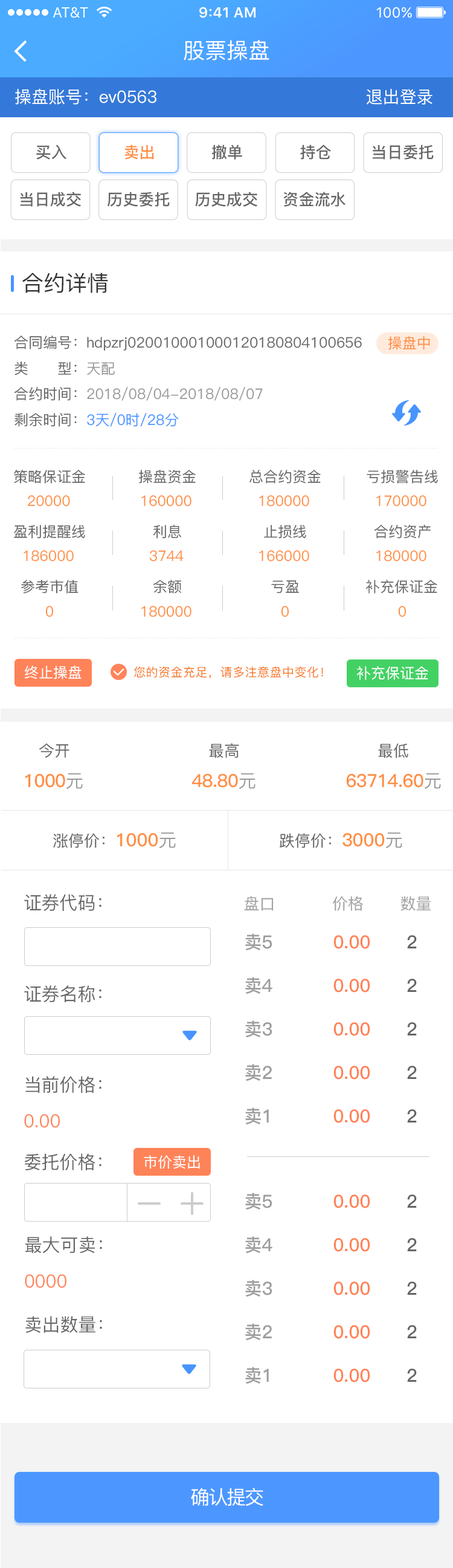
<style>
.page{position:relative;width:453px;height:1568px;background:#ffffff}
.page>*{position:absolute;margin:0}
.t1{font:21.8px "PingFang-SC-Medium";color:#ffffff}
.t2{font:16.9px "PingFang-SC-Medium";color:#ffffff}
.t3{font:15.7px "PingFang-SC-Bold";color:#666666}
.t4{font:15.7px "PingFang-SC-Bold";color:#ff8e42}
.t5{font:21.8px "PingFang-SC-Medium";color:#333333}
.t6{font:14.5px "PingFang-SC-Medium";color:#666666}
.t7{font:14.5px "PingFang-SC-Medium";color:#ff8e42}
.t8{font:14.5px "PingFang-SC-Medium";color:#999999}
.t9{font:14.5px "PingFang-SC-Medium";color:#4794ff}
.t10{font:14.5px "PingFang-SC-Medium";color:#ffffff}
.t11{font:12.1px "PingFang-SC-Medium";letter-spacing:0.025em;color:#f77116}
.t12{font:15.7px "PingFang-SC-Medium";color:#666666}
.t13{font:18.1px "PingFang-SC-Bold";letter-spacing:-0.02em;color:#ff8e42}
.t14{font:18.1px "PingFang-SC-Medium";letter-spacing:-0.02em;color:#999999}
.t15{font:18.1px "PingFang-SC-Bold";color:#ff8e42}
.t16{font:18.1px "PingFang-SC-Medium";color:#999999}
.t17{font:18.1px "PingFang-SC-Medium";color:#666666}
.t18{font:15.7px "PingFang-SC-Medium";color:#a2a2a2}
.t19{font:18.1px/43.5px "PingFang-SC-Bold";color:#ff8359}
.t20{font:18.1px/43.5px "PingFang-SC-Bold";color:#9d9d9d}
.t21{font:18.1px/43.5px "PingFang-SC-Bold";color:#666666}
.t22{font:18.1px/36.3px "PingFang-SC-Medium";color:#666666}
.t23{font:18.1px/54.4px "PingFang-SC-Medium";color:#666666}
.t24{font:18.1px/36.3px "PingFang-SC-Medium";color:#ff8359}
.t25{font:18.1px/41.1px "PingFang-SC-Medium";color:#666666}
.t26{font:18.1px/43.5px "PingFang-SC-Medium";color:#666666}
.t27{font:19.3px "PingFang-SC-Medium";letter-spacing:-0.06em;color:#ffffff}
</style>
<div class="page">
<p class="t1" style="left:184px;top:40px;width:86px;height:20px">股票操盘</p>
<p class="t2" style="left:15px;top:88px;width:418px;height:17px">操盘账号：ev0563                                     退出登录</p>
<p class="t3" style="left:36px;top:144px;width:30px;height:16px">买入</p>
<p class="t4" style="left:125px;top:144px;width:29px;height:16px">卖出</p>
<p class="t3" style="left:212px;top:144px;width:30px;height:16px">撤单</p>
<p class="t3" style="left:300px;top:144px;width:31px;height:16px">持仓</p>
<p class="t3" style="left:373px;top:144px;width:61px;height:16px">当日委托</p>
<p class="t3" style="left:20px;top:192px;width:61px;height:15px">当日成交</p>
<p class="t3" style="left:108px;top:192px;width:62px;height:15px">历史委托</p>
<p class="t3" style="left:195px;top:192px;width:63px;height:15px">历史成交</p>
<p class="t3" style="left:283px;top:192px;width:63px;height:15px">资金流水</p>
<p class="t5" style="left:22px;top:273px;width:86px;height:20px">合约详情</p>
<p class="t6" style="left:14px;top:335px;width:348px;height:16px">合同编号：hdpzrj020010001000120180804100656</p>
<p class="t7" style="left:388px;top:336px;width:42px;height:14px">操盘中</p>
<p class="t6" style="left:15px;top:361px;width:100px;height:14px">类      型：<span class="t8">天配</span></p>
<p class="t8" style="left:14px;top:387px;width:249px;height:14px"><span class="t6">合约时间：</span>2018/08/04-2018/08/07</p>
<p class="t9" style="left:15px;top:413px;width:164px;height:14px"><span class="t6">剩余时间：</span>3天/0时/28分</p>
<p class="t6" style="left:14px;top:470px;width:71px;height:14px">策略保证金</p>
<p class="t6" style="left:139px;top:470px;width:57px;height:14px">操盘资金</p>
<p class="t6" style="left:250px;top:470px;width:71px;height:14px">总合约资金</p>
<p class="t6" style="left:367px;top:470px;width:71px;height:14px">亏损警告线</p>
<p class="t7" style="left:28px;top:495px;width:42px;height:12px">20000</p>
<p class="t7" style="left:141px;top:495px;width:51px;height:12px">160000</p>
<p class="t7" style="left:259px;top:495px;width:50px;height:12px">180000</p>
<p class="t7" style="left:377px;top:495px;width:50px;height:12px">170000</p>
<p class="t6" style="left:14px;top:525px;width:71px;height:14px">盈利提醒线</p>
<p class="t6" style="left:154px;top:525px;width:27px;height:14px">利息</p>
<p class="t6" style="left:264px;top:525px;width:42px;height:14px">止损线</p>
<p class="t6" style="left:374px;top:525px;width:57px;height:14px">合约资产</p>
<p class="t7" style="left:24px;top:550px;width:50px;height:12px">186000</p>
<p class="t7" style="left:150px;top:550px;width:34px;height:12px">3744</p>
<p class="t7" style="left:259px;top:550px;width:50px;height:12px">166000</p>
<p class="t7" style="left:377px;top:550px;width:50px;height:12px">180000</p>
<p class="t6" style="left:21px;top:580px;width:58px;height:14px">参考市值</p>
<p class="t6" style="left:153px;top:580px;width:29px;height:14px">余额</p>
<p class="t6" style="left:271px;top:580px;width:28px;height:14px">亏盈</p>
<p class="t6" style="left:366px;top:580px;width:72px;height:14px">补充保证金</p>
<p class="t7" style="left:45px;top:606px;width:9px;height:11px">0</p>
<p class="t7" style="left:141px;top:606px;width:51px;height:11px">180000</p>
<p class="t7" style="left:281px;top:606px;width:9px;height:11px">0</p>
<p class="t7" style="left:398px;top:606px;width:9px;height:11px">0</p>
<p class="t10" style="left:25px;top:666px;width:57px;height:13px">终止操盘</p>
<p class="t11" style="left:134px;top:666px;width:189px;height:13px">您的资金充足，请多注意盘中变化！</p>
<p class="t10" style="left:357px;top:666px;width:72px;height:14px">补充保证金</p>
<p class="t12" style="left:39px;top:744px;width:31px;height:14px">今开</p>
<p class="t12" style="left:209px;top:743px;width:30px;height:15px">最高</p>
<p class="t12" style="left:378px;top:743px;width:31px;height:15px">最低</p>
<p class="t13" style="left:25px;top:773px;width:58px;height:16px">1000<span class="t14">元</span></p>
<p class="t13" style="left:192px;top:773px;width:64px;height:16px">48.80<span class="t14">元</span></p>
<p class="t13" style="left:346px;top:773px;width:95px;height:16px">63714.60<span class="t14">元</span></p>
<p class="t12" style="left:53px;top:832px;width:123px;height:16px">涨停价：<span class="t15">1000</span><span class="t16">元</span></p>
<p class="t12" style="left:280px;top:832px;width:123px;height:16px">跌停价：<span class="t15">3000</span><span class="t16">元</span></p>
<p class="t17" style="left:24px;top:894px;width:78px;height:17px">证券代码：</p>
<p class="t18" style="left:244px;top:896px;width:188px;height:15px">盘口           价格       数量</p>
<p class="t19" style="left:245px;top:933px;width:172px;height:192px"><span class="t20">卖5          </span>0.00<span class="t21">      2<br></span><span class="t20">卖4          </span>0.00<span class="t21">      2<br></span><span class="t20">卖3          </span>0.00<span class="t21">      2<br></span><span class="t20">卖2          </span>0.00<span class="t21">      2<br></span><span class="t20">卖1          </span>0.00<span class="t21">      2</span></p>
<p class="t22" style="left:24px;top:985px;width:78px;height:185px">证券名称：<br><br><span class="t23">当前价格：<br></span><span class="t24">0.00<br></span><span class="t25">委托价格：</span></p>
<p class="t10" style="left:144px;top:1155px;width:56px;height:14px">市价卖出</p>
<p class="t19" style="left:245px;top:1193px;width:172px;height:191px"><span class="t20">卖5          </span>0.00<span class="t21">      2<br></span><span class="t20">卖4          </span>0.00<span class="t21">      2<br></span><span class="t20">卖3          </span>0.00<span class="t21">      2<br></span><span class="t20">卖2          </span>0.00<span class="t21">      2<br></span><span class="t20">卖1          </span>0.00<span class="t21">      2</span></p>
<p class="t22" style="left:25px;top:1236px;width:77px;height:97px">最大可卖：<br><span class="t24">0000<br></span><span class="t26">卖出数量：</span></p>
<p class="t27" style="left:191px;top:1488px;width:73px;height:18px">确认提交</p>
</div>
